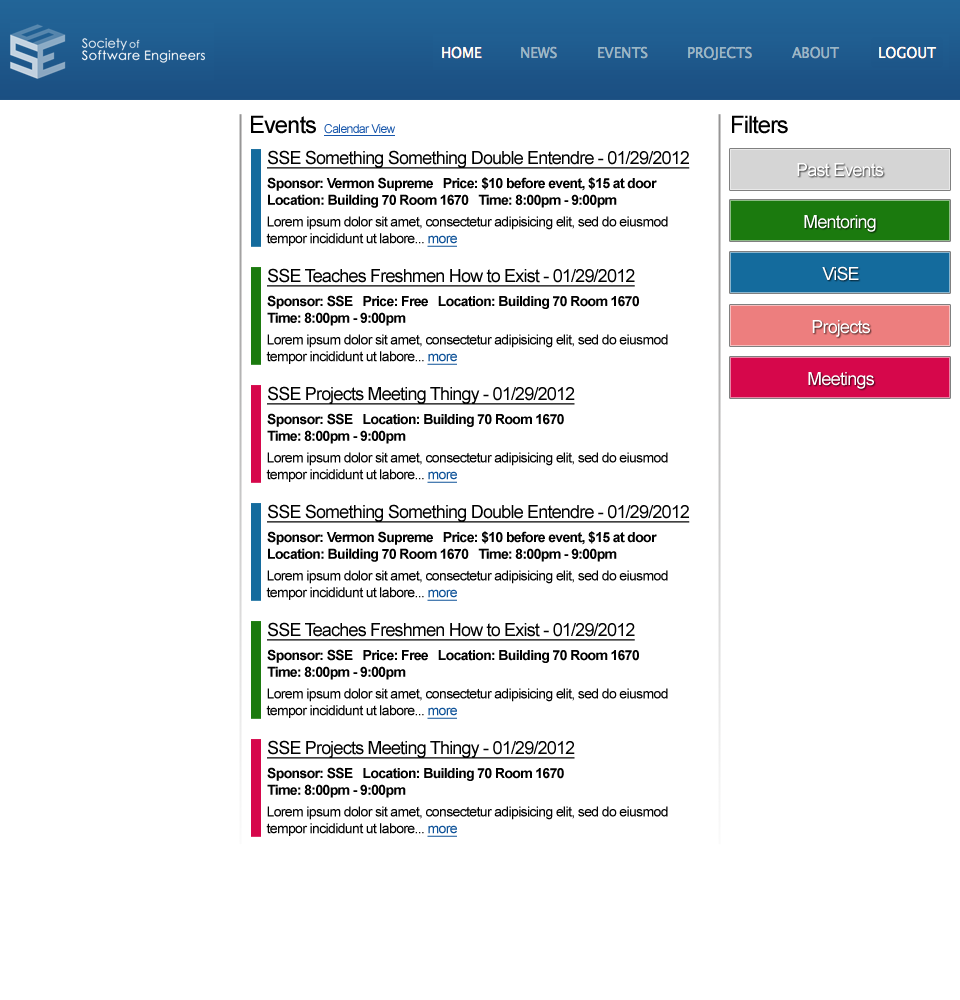
<style>
.page{position:relative;width:960px;height:1000px;background:#ffffff}
.page>*{position:absolute;margin:0}
.t1{font:24px "ArialMT";letter-spacing:-0.045em;color:#000000}
.t2{font:12px "ArialMT";letter-spacing:-0.045em;color:#1756ab;text-decoration:underline}
.t3{font:18px "ArialMT";letter-spacing:-0.045em;color:#010101;text-decoration:underline}
.t4{font:18px "ArialMT";letter-spacing:-0.045em;color:#ffffff}
.t5{font:14px "Arial-BoldMT";letter-spacing:-0.045em;color:#010101}
.t6{font:14px "ArialMT";letter-spacing:-0.045em;color:#010101}
.t7{font:14px "ArialMT";letter-spacing:-0.045em;color:#0e5298;text-decoration:underline}
</style>
<div class="page">
<p class="t1" style="left:251px;top:115px;width:65px;height:19px">Events</p>
<p class="t2" style="left:324px;top:124px;width:71px;height:12px">Calendar View</p>
<p class="t1" style="left:732px;top:115px;width:56px;height:19px">Filters</p>
<p class="t3" style="left:267px;top:150px;width:423px;height:19px">SSE Something Something Double Entendre - 01/29/2012</p>
<p class="t4" style="left:797px;top:163px;width:87px;height:14px">Past Events</p>
<p class="t5" style="left:267px;top:177px;width:390px;height:31px">Sponsor: Vermon Supreme   Price: $10 before event, $15 at door<br>Location: Building 70 Room 1670   Time: 8:00pm - 9:00pm</p>
<p class="t6" style="left:266px;top:216px;width:402px;height:31px">Lorem ipsum dolor sit amet, consectetur adipisicing elit, sed do eiusmod<br>tempor incididunt ut labore... <span class="t7">more</span></p>
<p class="t4" style="left:804px;top:215px;width:72px;height:17px">Mentoring</p>
<p class="t3" style="left:267px;top:268px;width:368px;height:19px">SSE Teaches Freshmen How to Exist - 01/29/2012</p>
<p class="t4" style="left:822px;top:266px;width:37px;height:15px">ViSE</p>
<p class="t5" style="left:267px;top:295px;width:372px;height:31px">Sponsor: SSE   Price: Free   Location: Building 70 Room 1670<br>Time: 8:00pm - 9:00pm</p>
<p class="t4" style="left:812px;top:320px;width:58px;height:17px">Projects</p>
<p class="t6" style="left:266px;top:334px;width:402px;height:31px">Lorem ipsum dolor sit amet, consectetur adipisicing elit, sed do eiusmod<br>tempor incididunt ut labore... <span class="t7">more</span></p>
<p class="t4" style="left:808px;top:372px;width:66px;height:17px">Meetings</p>
<p class="t3" style="left:267px;top:386px;width:308px;height:19px">SSE Projects Meeting Thingy - 01/29/2012</p>
<p class="t5" style="left:267px;top:413px;width:297px;height:31px">Sponsor: SSE   Location: Building 70 Room 1670<br>Time: 8:00pm - 9:00pm</p>
<p class="t6" style="left:266px;top:452px;width:402px;height:31px">Lorem ipsum dolor sit amet, consectetur adipisicing elit, sed do eiusmod<br>tempor incididunt ut labore... <span class="t7">more</span></p>
<p class="t3" style="left:267px;top:504px;width:423px;height:19px">SSE Something Something Double Entendre - 01/29/2012</p>
<p class="t5" style="left:267px;top:531px;width:390px;height:31px">Sponsor: Vermon Supreme   Price: $10 before event, $15 at door<br>Location: Building 70 Room 1670   Time: 8:00pm - 9:00pm</p>
<p class="t6" style="left:266px;top:570px;width:402px;height:31px">Lorem ipsum dolor sit amet, consectetur adipisicing elit, sed do eiusmod<br>tempor incididunt ut labore... <span class="t7">more</span></p>
<p class="t3" style="left:267px;top:622px;width:368px;height:19px">SSE Teaches Freshmen How to Exist - 01/29/2012</p>
<p class="t5" style="left:267px;top:649px;width:372px;height:31px">Sponsor: SSE   Price: Free   Location: Building 70 Room 1670<br>Time: 8:00pm - 9:00pm</p>
<p class="t6" style="left:266px;top:688px;width:402px;height:31px">Lorem ipsum dolor sit amet, consectetur adipisicing elit, sed do eiusmod<br>tempor incididunt ut labore... <span class="t7">more</span></p>
<p class="t3" style="left:267px;top:740px;width:308px;height:19px">SSE Projects Meeting Thingy - 01/29/2012</p>
<p class="t5" style="left:267px;top:767px;width:297px;height:31px">Sponsor: SSE   Location: Building 70 Room 1670<br>Time: 8:00pm - 9:00pm</p>
<p class="t6" style="left:266px;top:806px;width:402px;height:31px">Lorem ipsum dolor sit amet, consectetur adipisicing elit, sed do eiusmod<br>tempor incididunt ut labore... <span class="t7">more</span></p>
</div>
